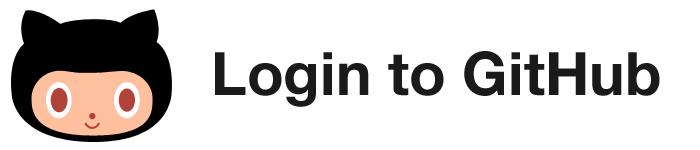
<style>
.page{position:relative;width:700px;height:150px;background:#ffffff}
.page>*{position:absolute;margin:0}
.t1{font:60.1px "HelveticaNeue-Bold";color:#1a1a1a}
</style>
<div class="page">
<p class="t1" style="left:215px;top:51px;width:445px;height:56px">Login to GitHub</p>
</div>
